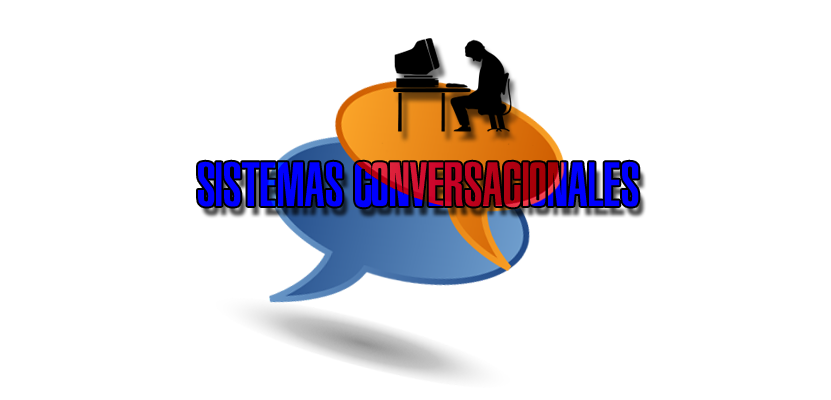
<style>
.page{position:relative;width:831px;height:400px;background:#ffffff}
.page>*{position:absolute;margin:0}
.t1{font:50px "Metal-Gear-Solid-2"}
</style>
<div class="page">
<p class="t1" style="left:198px;top:161px;width:441px;height:47px">SISTEMAS CONVERSACIONALES</p>
</div>
